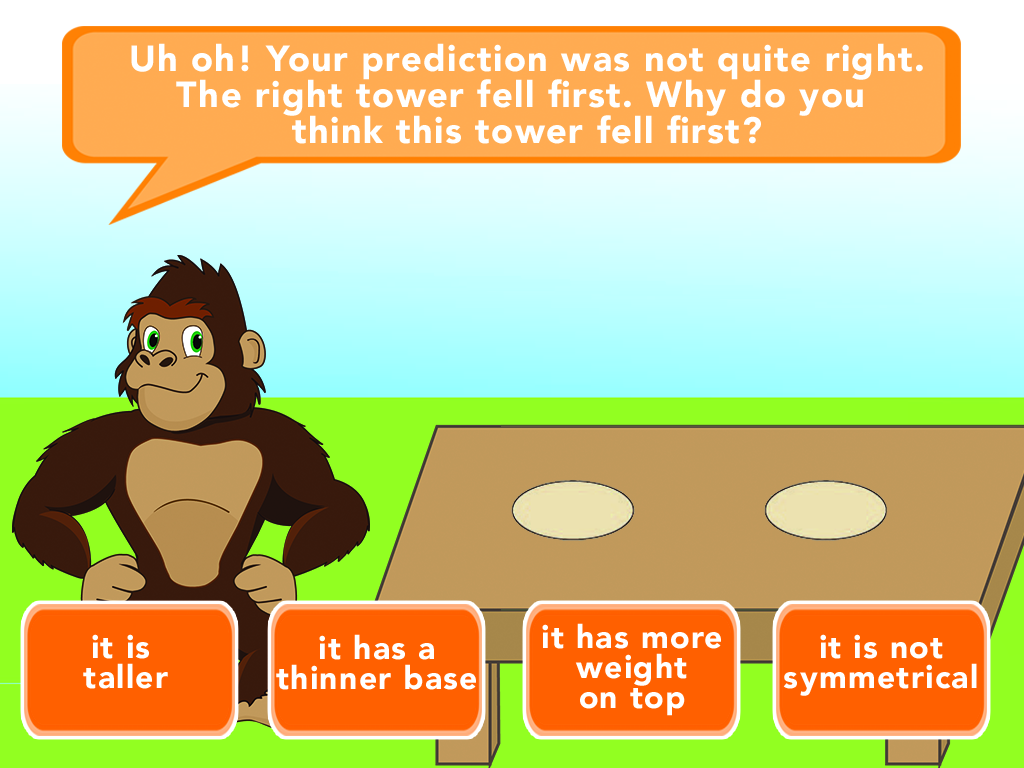
<style>
.page{position:relative;width:1024px;height:768px}
.page>*{position:absolute;margin:0}
.t1{font:36px/36px "Avenir-Black";letter-spacing:0.04em;color:#ffffff}
.t2{font:32px/30px "Avenir-Black";letter-spacing:0.04em;color:#ffffff}
</style>
<div class="page">
<p class="t1" style="left:131px;top:43px;width:792px;height:101px;text-align:center">Uh oh! Your prediction was not quite right.<br>The right tower fell first. Why do you <br>think this tower fell first?</p>
<p class="t2" style="left:542px;top:623px;width:179px;height:93px;text-align:center">it has more<br>weight<br>on top</p>
<p class="t2" style="left:83px;top:634px;width:85px;height:55px;text-align:center">it is <br>taller</p>
<p class="t2" style="left:276px;top:634px;width:200px;height:56px;text-align:center">it has a<br>thinner base</p>
<p class="t2" style="left:783px;top:634px;width:194px;height:62px;text-align:center">it is not<br>symmetrical</p>
</div>
